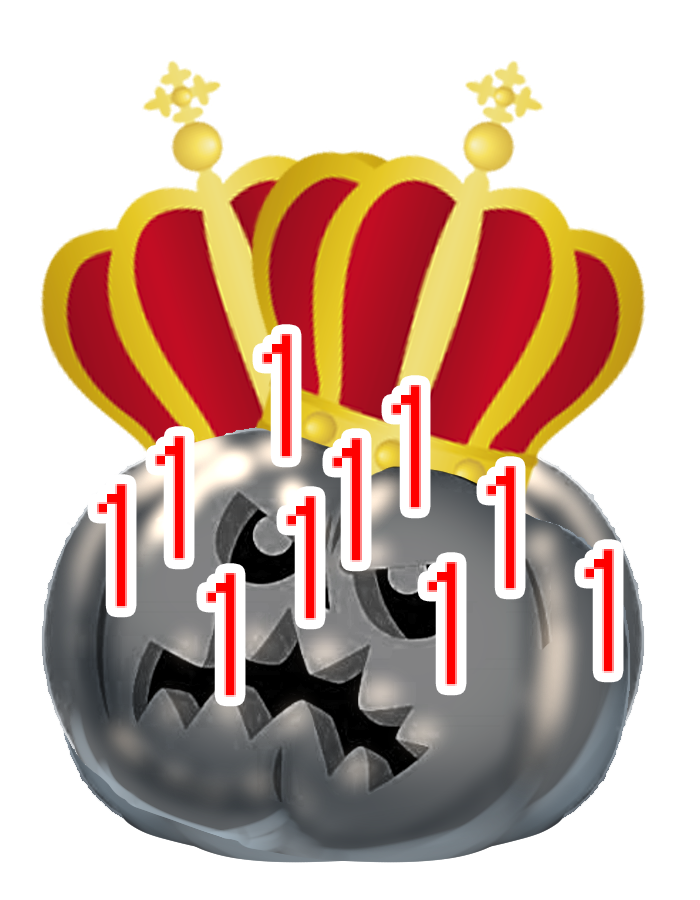
<style>
.page{position:relative;width:700px;height:900px;background:#ffffff}
.page>*{position:absolute;margin:0}
.t1{font:200px "System";letter-spacing:-0.04em;color:#ff0000}
</style>
<div class="page">
<p class="t1" style="left:262px;top:334px;width:30px;height:124px">1</p>
<p class="t1" style="left:391px;top:385px;width:30px;height:124px">1</p>
<p class="t1" style="left:155px;top:436px;width:30px;height:124px">1</p>
<p class="t1" style="left:332px;top:438px;width:30px;height:124px">1</p>
<p class="t1" style="left:486px;top:466px;width:30px;height:124px">1</p>
<p class="t1" style="left:97px;top:484px;width:30px;height:124px">1</p>
<p class="t1" style="left:286px;top:496px;width:30px;height:124px">1</p>
<p class="t1" style="left:584px;top:549px;width:30px;height:124px">1</p>
<p class="t1" style="left:427px;top:562px;width:30px;height:124px">1</p>
<p class="t1" style="left:206px;top:573px;width:30px;height:124px">1</p>
</div>
